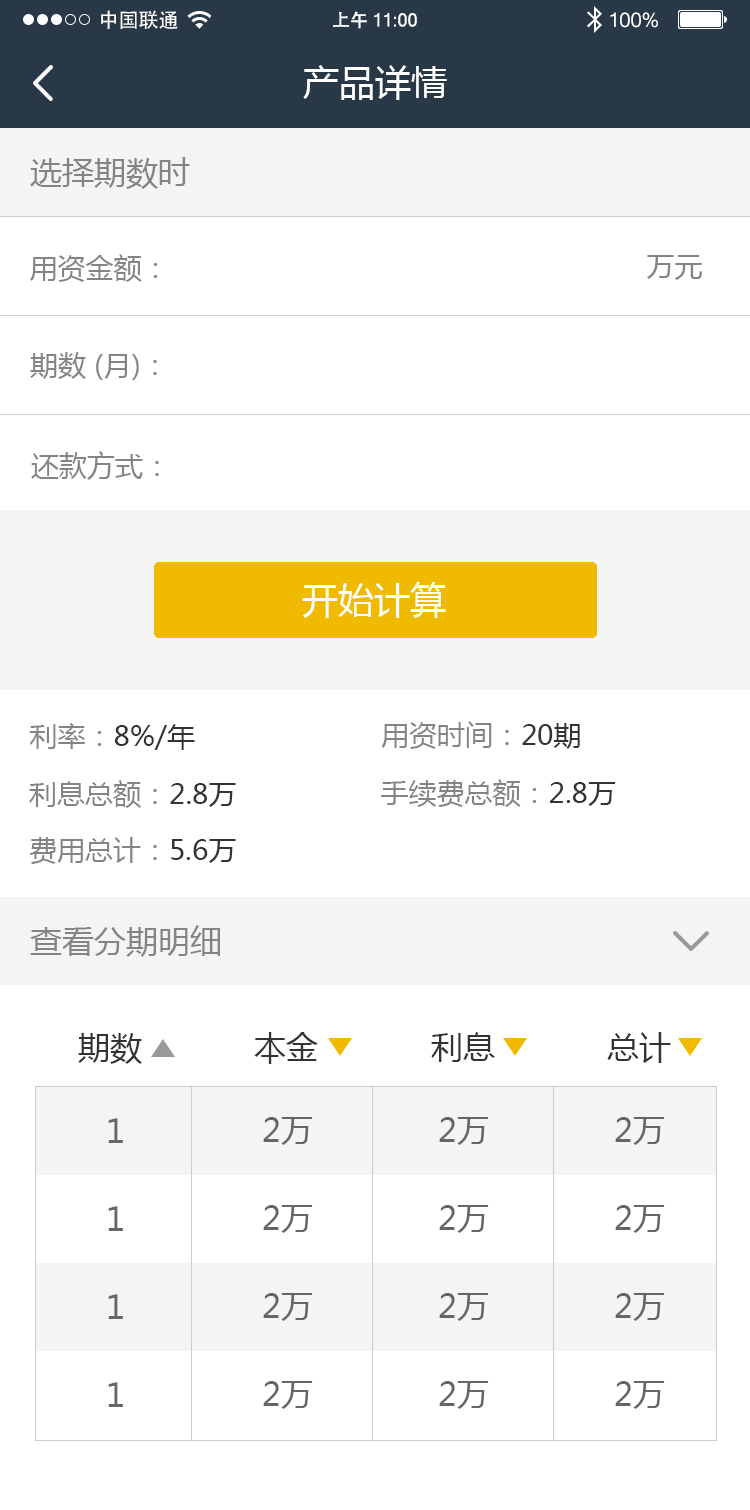
<style>
.page{position:relative;width:750px;height:1510px;background:#ffffff}
.page>*{position:absolute;margin:0}
.t1{font:20px "STHeiti";color:#ffffff}
.t2{font:18px "MicrosoftSansSerif";color:#ffffff}
.t3{font:18px "STHeiti";color:#ffffff}
.t4{font:20px "MicrosoftSansSerif";color:#ffffff}
.t5{font:36px "MicrosoftYaHei";color:#ffffff}
.t6{font:32px "MicrosoftYaHei";color:#848484}
.t7{font:28px "MicrosoftYaHei";color:#848484}
.t8{font:28px "MicrosoftYaHei";color:#333333}
.t9{font:32px "MicrosoftYaHei";color:#333333}
.t10{font:32px "MicrosoftYaHei";color:#666666}
</style>
<div class="page">
<p class="t1" style="left:101px;top:10px;width:77px;height:19px">中国联通</p>
<p class="t2" style="left:333px;top:11px;width:84px;height:18px"><span class="t3">上午 </span>11:00</p>
<p class="t4" style="left:610px;top:12px;width:48px;height:16px">100%</p>
<p class="t5" style="left:303px;top:65px;width:144px;height:35px">产品详情</p>
<p class="t6" style="left:30px;top:157px;width:160px;height:32px">选择期数时</p>
<p class="t7" style="left:30px;top:254px;width:128px;height:28px">用资金额：</p>
<p class="t7" style="left:647px;top:255px;width:56px;height:25px">万元</p>
<p class="t7" style="left:30px;top:352px;width:127px;height:28px">期数 (月)：</p>
<p class="t7" style="left:31px;top:451px;width:128px;height:29px">还款方式：</p>
<p class="t5" style="left:302px;top:582px;width:144px;height:36px">开始计算</p>
<p class="t8" style="left:29px;top:723px;width:166px;height:27px"><span class="t7">利率：</span>8%/年</p>
<p class="t7" style="left:381px;top:721px;width:199px;height:28px">用资时间：<span class="t8">20期</span></p>
<p class="t7" style="left:29px;top:780px;width:207px;height:28px">利息总额：<span class="t8">2.8万</span></p>
<p class="t7" style="left:381px;top:779px;width:235px;height:28px">手续费总额：<span class="t8">2.8万</span></p>
<p class="t7" style="left:29px;top:837px;width:207px;height:27px">费用总计：<span class="t8">5.6万</span></p>
<p class="t6" style="left:30px;top:925px;width:190px;height:32px">查看分期明细</p>
<p class="t9" style="left:78px;top:1033px;width:64px;height:31px">期数</p>
<p class="t9" style="left:254px;top:1032px;width:64px;height:32px">本金</p>
<p class="t9" style="left:431px;top:1032px;width:64px;height:30px">利息</p>
<p class="t9" style="left:607px;top:1032px;width:64px;height:31px">总计</p>
<p class="t10" style="left:108px;top:1118px;width:15px;height:25px">1</p>
<p class="t10" style="left:263px;top:1117px;width:50px;height:28px">2万</p>
<p class="t10" style="left:439px;top:1117px;width:50px;height:28px">2万</p>
<p class="t10" style="left:615px;top:1117px;width:50px;height:28px">2万</p>
<p class="t10" style="left:108px;top:1206px;width:15px;height:25px">1</p>
<p class="t10" style="left:263px;top:1205px;width:50px;height:28px">2万</p>
<p class="t10" style="left:439px;top:1205px;width:50px;height:28px">2万</p>
<p class="t10" style="left:615px;top:1205px;width:50px;height:28px">2万</p>
<p class="t10" style="left:108px;top:1294px;width:15px;height:25px">1</p>
<p class="t10" style="left:263px;top:1293px;width:50px;height:28px">2万</p>
<p class="t10" style="left:439px;top:1293px;width:50px;height:28px">2万</p>
<p class="t10" style="left:615px;top:1293px;width:50px;height:28px">2万</p>
<p class="t10" style="left:108px;top:1382px;width:15px;height:25px">1</p>
<p class="t10" style="left:263px;top:1381px;width:50px;height:28px">2万</p>
<p class="t10" style="left:439px;top:1381px;width:50px;height:28px">2万</p>
<p class="t10" style="left:615px;top:1381px;width:50px;height:28px">2万</p>
</div>
